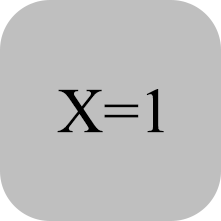
<style>
.page{position:relative;width:221px;height:221px;background:#bfbfbf}
.page>*{position:absolute;margin:0}
.t1{font:63.9px "TimesNewRomanPSMT";color:#000000}
</style>
<div class="page">
<p class="t1" style="left:57px;top:89px;width:107px;height:44px">X=1</p>
</div>
